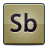
<style>
.page{position:relative;width:48px;height:48px;background:#ffffff}
.page>*{position:absolute;margin:0}
.t1{font:25px "MyriadPro-Regular";letter-spacing:0.01em;color:#18121c;font-weight:bold}
</style>
<div class="page">
<p class="t1" style="left:10px;top:13px;width:27px;height:19px">Sb</p>
</div>
